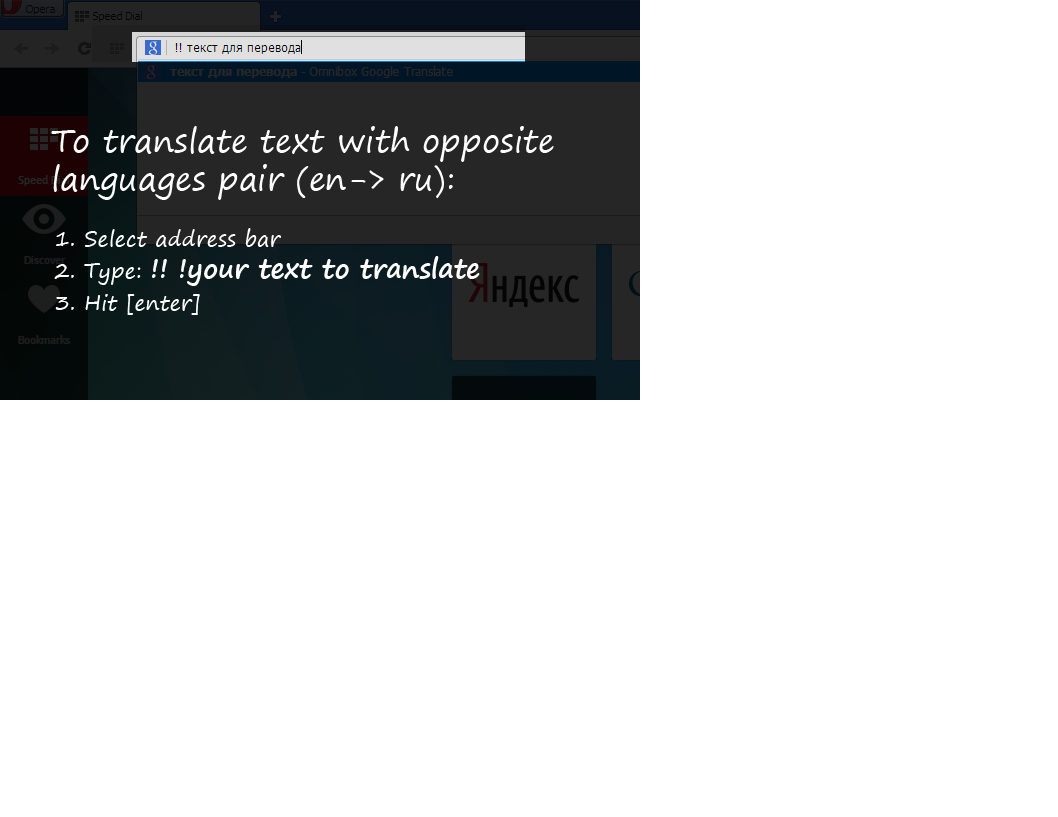
<style>
.page{position:relative;width:1058px;height:817px;background:#ffffff}
.page>*{position:absolute;margin:0}
.t1{font:32px "SegoePrint";color:#ffffff}
.t2{font:21.3px/32px "SegoePrint";color:#ffffff}
.t3{font:26.7px/32px "SegoePrint-Bold";color:#ffffff}
</style>
<div class="page">
<p class="t1" style="left:51px;top:126px;width:503px;height:74px">To translate text with opposite<br>languages pair (en-&gt; ru):</p>
<p class="t2" style="left:54px;top:228px;width:426px;height:87px">1. Select address bar<br>2. Type: <span class="t3">!! !your text to translate<br></span>3. Hit [enter]</p>
</div>
